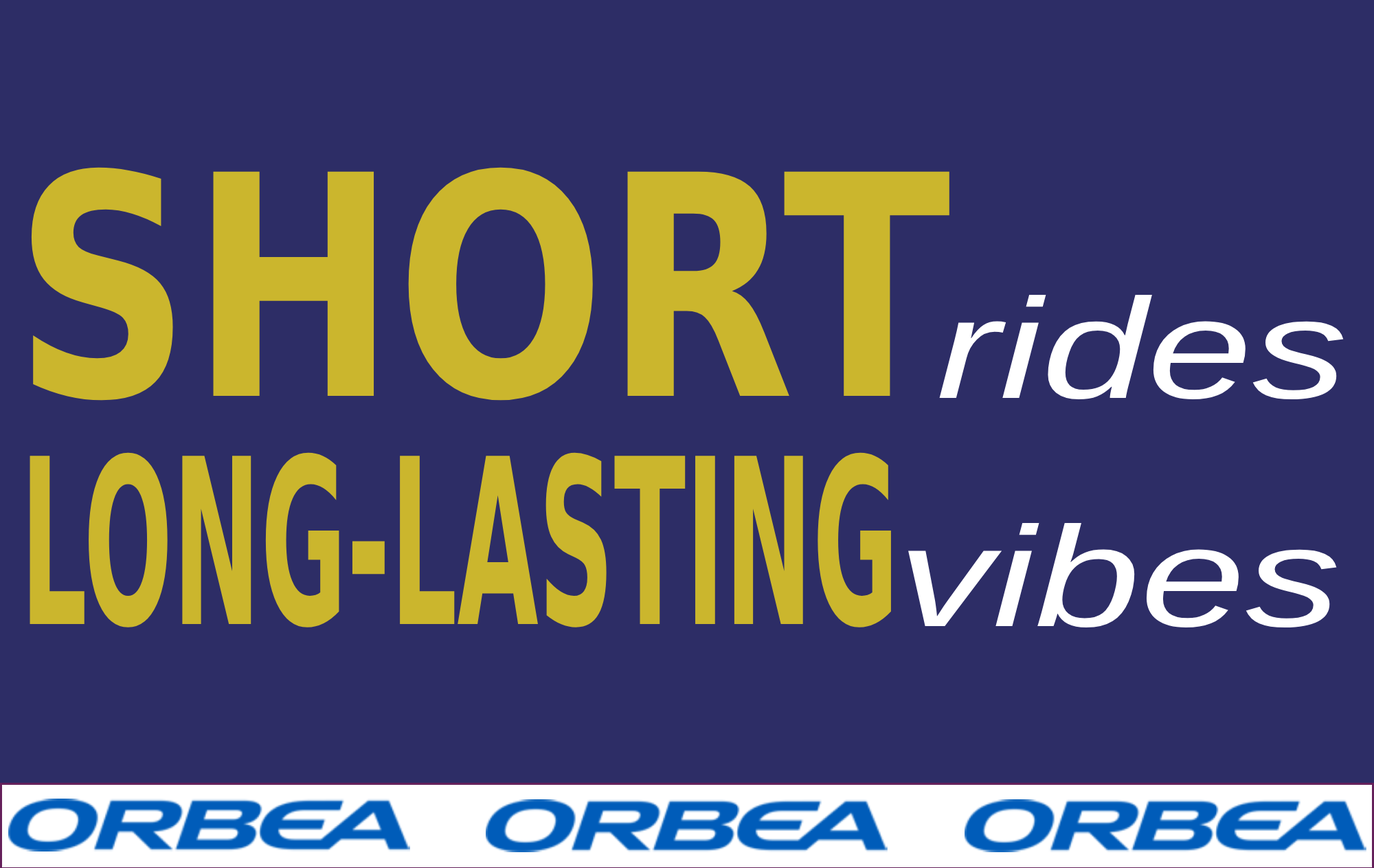
<style>
.page{position:relative;width:1374px;height:868px;background:#2d2d66}
.page>*{position:absolute;margin:0}
.t1{font:307.5px "Arial-Black";color:#cbb62d;scale:0.8 1}
.t2{font:142.3px "Arial-ItalicMT";color:#ffffff;scale:1.33 1}
.t3{font:230.7px "Arial-Black";color:#cbb62d;scale:0.46 1}
</style>
<div class="page">
<p class="t1" style="left:31px;top:167px;width:919px;height:234px">SHORT</p>
<p class="t2" style="left:939px;top:294px;width:405px;height:106px">rides</p>
<p class="t3" style="left:30px;top:452px;width:861px;height:175px">LONG-LASTING</p>
<p class="t2" style="left:908px;top:522px;width:429px;height:106px">vibes</p>
</div>
